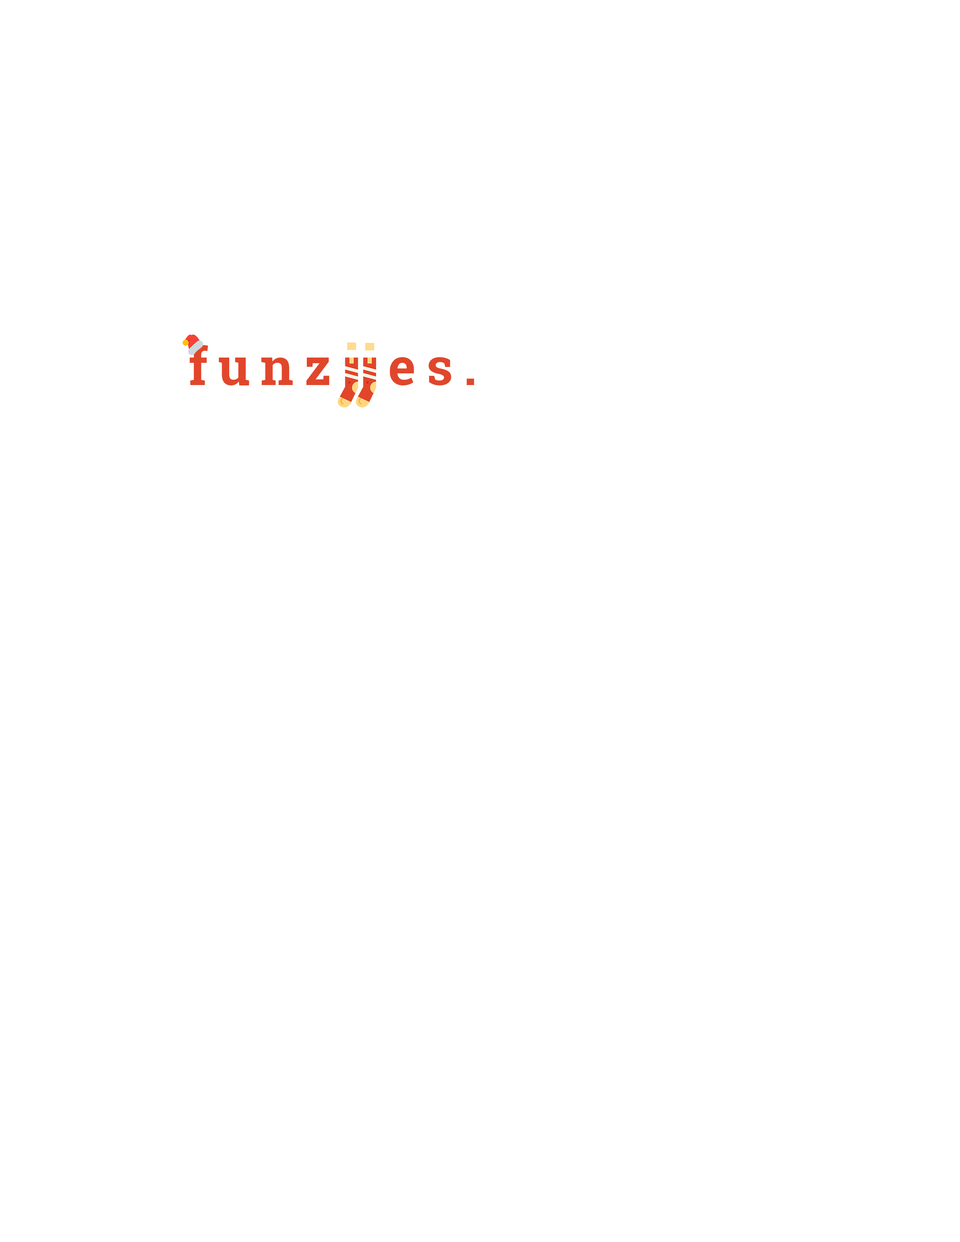
<style>
.page{position:relative;width:960px;height:1242px;background:#ffffff}
.page>*{position:absolute;margin:0}
.t1{font:52px "RobotoSlab-Bold";letter-spacing:0.2em;color:#e1462b}
</style>
<div class="page">
<p class="t1" style="left:189px;top:345px;width:285px;height:40px">funz  es.</p>
</div>
